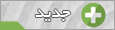
<style>
.page{position:relative;width:115px;height:30px}
.page>*{position:absolute;margin:0}
.t1{font:18px "BYekan";color:#ffffff}
</style>
<div class="page">
<p class="t1" style="left:35px;top:9px;width:36px;height:12px">جدید</p>
</div>
